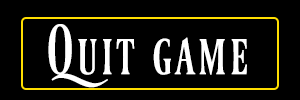
<style>
.page{position:relative;width:300px;height:100px;background:#000000}
.page>*{position:absolute;margin:0}
.t1{font:60px "Ferrum";color:#ffffff}
</style>
<div class="page">
<p class="t1" style="left:48px;top:24px;width:199px;height:64px">Quit game</p>
</div>
